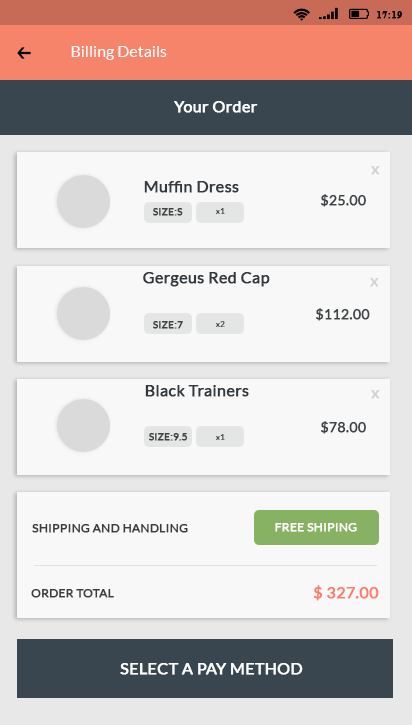
<style>
.page{position:relative;width:412px;height:725px;background:#f8f8f8}
.page>*{position:absolute;margin:0}
.t1{font:10px "TimesNewRomanPS-BoldMT";letter-spacing:0.025em;color:#000000;font-weight:bold}
.t2{font:16px "Lato-Regular";color:#ffffff}
.t3{font:16px "Lato-Regular";color:#ffffff;font-weight:bold}
.t4{font:16px "Lato-Regular";color:#d3d3d3;font-weight:bold}
.t5{font:16px "Lato-Regular";color:#32393f;font-weight:bold}
.t6{font:14px "Lato-Regular";color:#3e4346;font-weight:bold}
.t7{font:10px "Lato-Regular";color:#3e4346;font-weight:bold}
.t8{font:8px "Lato-Regular";color:#3e4346;font-weight:bold}
.t9{font:12px "Lato-Regular";color:#393d40;font-weight:bold}
.t10{font:12px "Lato-Regular";color:#ffffff;font-weight:bold}
.t11{font:16px "Lato-Regular";color:#fb7d67;font-weight:bold}
</style>
<div class="page">
<p class="t1" style="left:377px;top:11px;width:25px;height:8px">17:19</p>
<p class="t2" style="left:71px;top:46px;width:96px;height:14px">Billing Details</p>
<p class="t3" style="left:174px;top:101px;width:84px;height:12px">Your Order</p>
<p class="t4" style="left:371px;top:166px;width:9px;height:9px">x</p>
<p class="t5" style="left:144px;top:181px;width:95px;height:12px">Muffin Dress</p>
<p class="t6" style="left:321px;top:194px;width:45px;height:13px">$25.00</p>
<p class="t7" style="left:153px;top:208px;width:30px;height:8px">SIZE:S</p>
<p class="t8" style="left:215px;top:208px;width:10px;height:6px">x1</p>
<p class="t5" style="left:143px;top:272px;width:127px;height:15px">Gergeus Red Cap</p>
<p class="t4" style="left:370px;top:278px;width:9px;height:9px">x</p>
<p class="t6" style="left:316px;top:308px;width:54px;height:13px">$112.00</p>
<p class="t7" style="left:153px;top:321px;width:30px;height:8px">SIZE:7</p>
<p class="t8" style="left:215px;top:321px;width:10px;height:6px">x2</p>
<p class="t5" style="left:145px;top:385px;width:104px;height:12px">Black Trainers</p>
<p class="t4" style="left:371px;top:390px;width:9px;height:9px">x</p>
<p class="t6" style="left:321px;top:421px;width:45px;height:13px">$78.00</p>
<p class="t7" style="left:149px;top:433px;width:38px;height:8px">SIZE:9.5</p>
<p class="t8" style="left:215px;top:434px;width:10px;height:6px">x1</p>
<p class="t9" style="left:32px;top:524px;width:156px;height:9px">SHIPPING AND HANDLING</p>
<p class="t10" style="left:275px;top:523px;width:82px;height:9px">FREE SHIPING</p>
<p class="t9" style="left:31px;top:589px;width:83px;height:9px">ORDER TOTAL</p>
<p class="t11" style="left:314px;top:585px;width:65px;height:16px">$ 327.00</p>
<p class="t3" style="left:120px;top:663px;width:183px;height:12px">SELECT A PAY METHOD</p>
</div>
